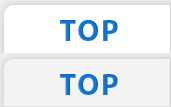
<style>
.page{position:relative;width:171px;height:107px;background:#ffffff}
.page>*{position:absolute;margin:0}
.t1{font:30px "MyriadPro-Bold";letter-spacing:0.06em;color:#0d75d7}
</style>
<div class="page">
<p class="t1" style="left:60px;top:20px;width:58px;height:21px">TOP</p>
<p class="t1" style="left:60px;top:74px;width:58px;height:21px">TOP</p>
</div>
